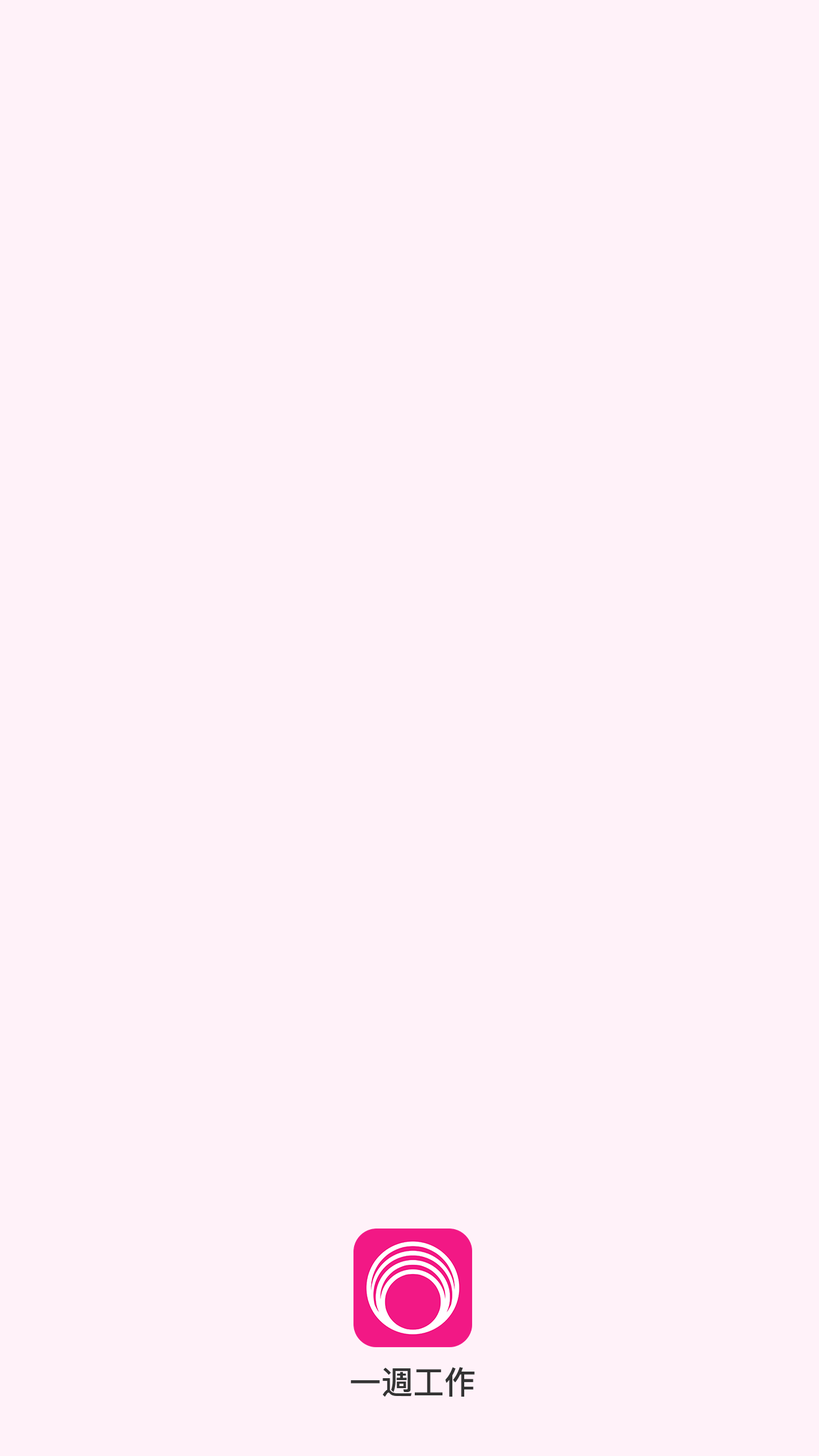
<style>
.page{position:relative;width:819px;height:1456px;background:#fff2f9}
.page>*{position:absolute;margin:0}
.t1{font:31.7px "PingFang-SC-Bold";color:#333333}
</style>
<div class="page">
<p class="t1" style="left:351px;top:1367px;width:124px;height:30px">一週工作</p>
</div>
